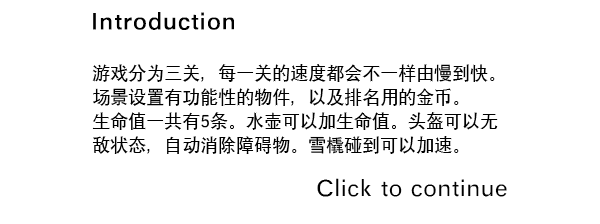
<style>
.page{position:relative;width:600px;height:224px;background:#ffffff}
.page>*{position:absolute;margin:0}
.t1{font:24px "SIL-Hei-Med-Jian";color:#000000;font-weight:bold}
.t2{font:18px/24px "SIL-Hei-Med-Jian";color:#000000}
.t3{font:24px "SIL-Hei-Med-Jian";color:#000000}
</style>
<div class="page">
<p class="t1" style="left:93px;top:12px;width:141px;height:18px">Introduction</p>
<p class="t2" style="left:92px;top:64px;width:406px;height:90px">游戏分为三关，每一关的速度都会不一样由慢到快。<br>场景设置有功能性的物件，以及排名用的金币。<br>生命值一共有5条。水壶可以加生命值。头盔可以无<br>敌状态，自动消除障碍物。雪橇碰到可以加速。</p>
<p class="t3" style="left:317px;top:178px;width:190px;height:19px">Click to continue</p>
</div>
